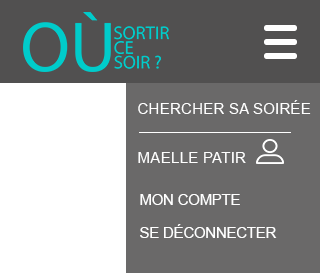
<style>
.page{position:relative;width:320px;height:273px;background:#6a6969}
.page>*{position:absolute;margin:0}
.t1{font:15px "ArialMT";color:#ffffff;text-transform:uppercase}
.t2{font:15.3px "ArialMT";color:#ffffff;text-transform:uppercase}
.t3{font:14.7px "ArialMT";color:#ffffff;text-transform:uppercase}
</style>
<div class="page">
<p class="t1" style="left:138px;top:100px;width:173px;height:14px">chercher sa soirée</p>
<p class="t2" style="left:138px;top:152px;width:108px;height:11px">maelle patir</p>
<p class="t3" style="left:140px;top:194px;width:100px;height:11px">mon compte</p>
<p class="t3" style="left:140px;top:224px;width:137px;height:14px">se déconnecter</p>
</div>
